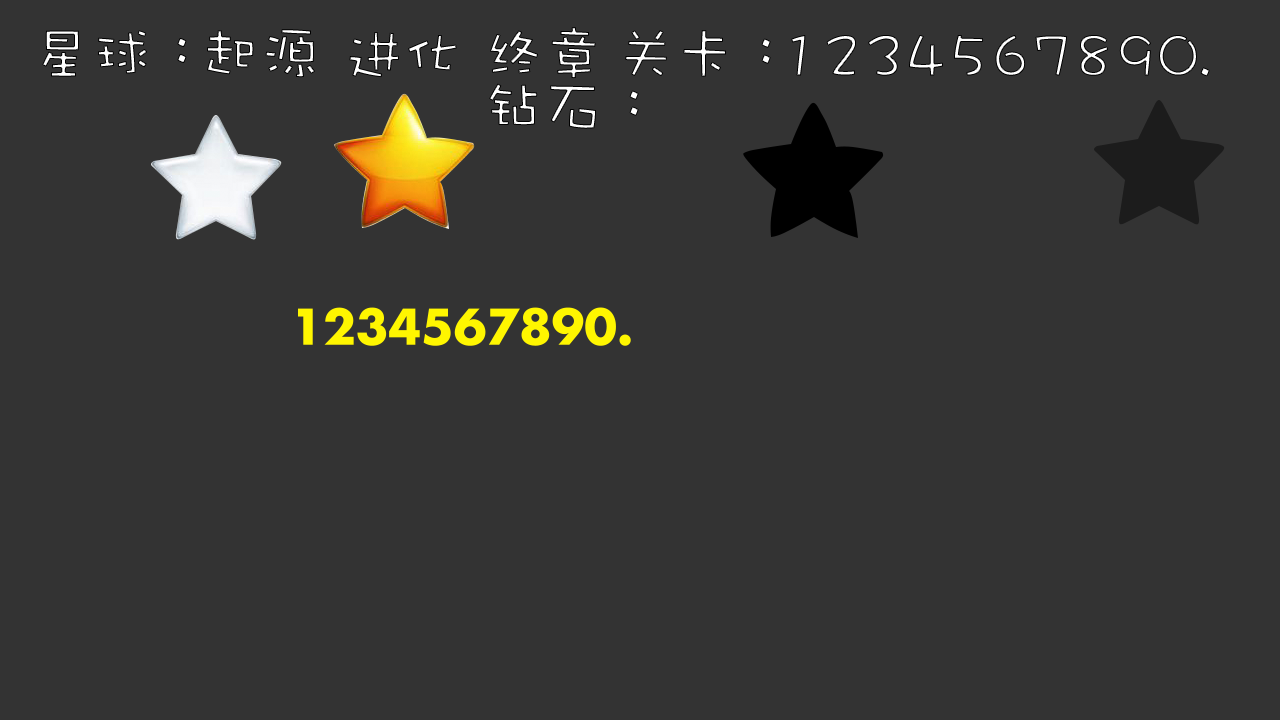
<style>
.page{position:relative;width:1280px;height:720px;background:#333333}
.page>*{position:absolute;margin:0}
.t1{font:60px "DFWaWaSC-W5"}
</style>
<div class="page">
<p class="t1" style="left:42px;top:30px;width:145px;height:47px">星球：</p>
<p class="t1" style="left:207px;top:29px;width:108px;height:49px">起源</p>
<p class="t1" style="left:490px;top:27px;width:106px;height:52px">终章</p>
<p class="t1" style="left:625px;top:30px;width:146px;height:47px">关卡：</p>
<p class="t1" style="left:349px;top:32px;width:108px;height:46px">进化</p>
<p class="t1" style="left:791px;top:35px;width:419px;height:42px">1234567890.</p>
<p class="t1" style="left:489px;top:83px;width:150px;height:46px">钻石：</p>
</div>
